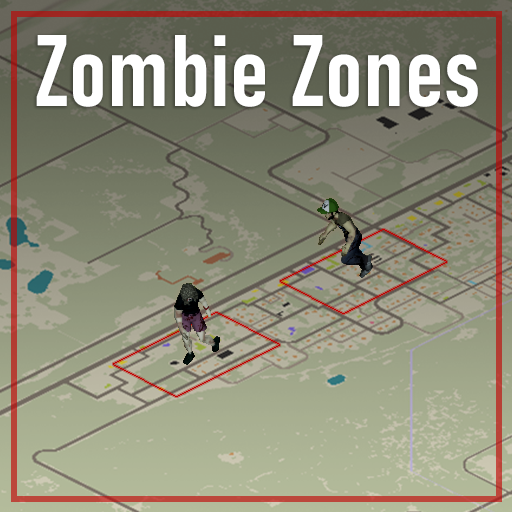
<style>
.page{position:relative;width:512px;height:512px}
.page>*{position:absolute;margin:0}
.t1{font:100px "Bahnschrift-SemiBoldCondensed";color:#ffffff;font-weight:bold}
</style>
<div class="page">
<p class="t1" style="left:36px;top:35px;width:442px;height:72px">Zombie Zones</p>
</div>
